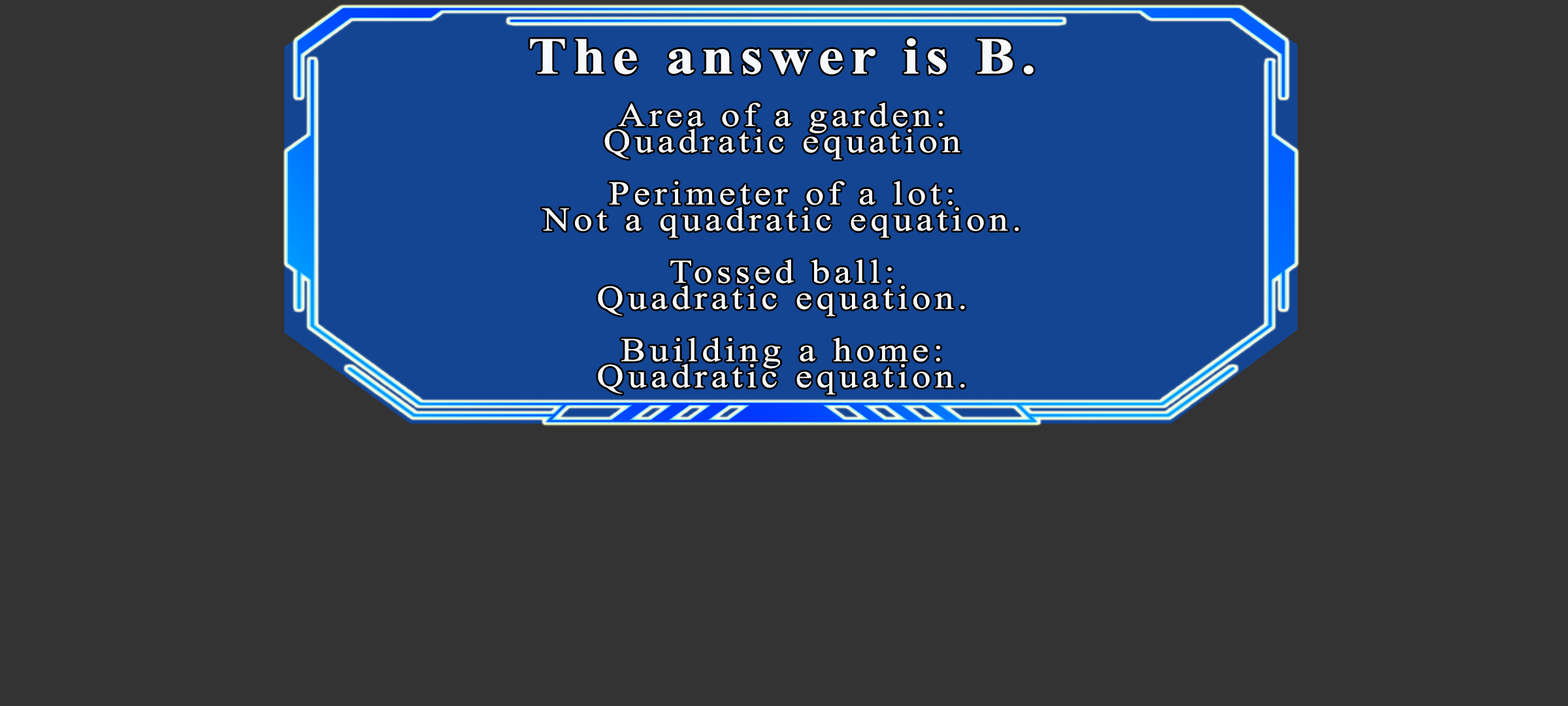
<style>
.page{position:relative;width:1568px;height:706px;background:#333333}
.page>*{position:absolute;margin:0}
.t1{font:51.7px "TimesNewRomanPS-BoldMT";letter-spacing:0.115em;color:#f7f9fb;scale:1.12 1}
.t2{font:33.2px/26.1px "TimesNewRomanPSMT";letter-spacing:0.115em;color:#f7f9fb;scale:1.12 1}
</style>
<div class="page">
<p class="t1" style="left:530px;top:38px;width:504px;height:36px">The answer is B.</p>
<p class="t2" style="left:542px;top:103px;width:477px;height:292px;text-align:center">Area of a garden:<br>Quadratic equation<br><br>Perimeter of a lot:<br>Not a quadratic equation.<br><br>Tossed ball:<br>Quadratic equation.<br><br>Building a home:<br>Quadratic equation.</p>
</div>
